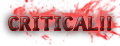
<style>
.page{position:relative;width:120px;height:46px}
.page>*{position:absolute;margin:0}
.t1{font:18px "HYsanB";font-weight:bold}
</style>
<div class="page">
<p class="t1" style="left:8px;top:16px;width:103px;height:15px">CRITICAL!!</p>
</div>
